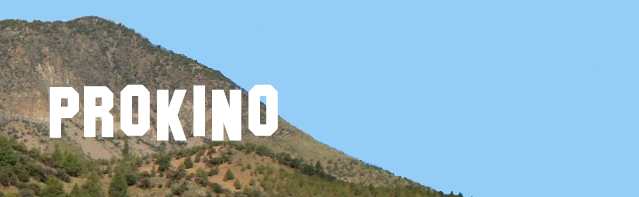
<style>
.page{position:relative;width:639px;height:197px;background:#94cef7}
.page>*{position:absolute;margin:0}
.t1{font:72px "SFHollywoodHills";color:#ffffff;font-weight:bold}
</style>
<div class="page">
<p class="t1" style="left:49px;top:84px;width:229px;height:57px">PROKINO</p>
</div>
